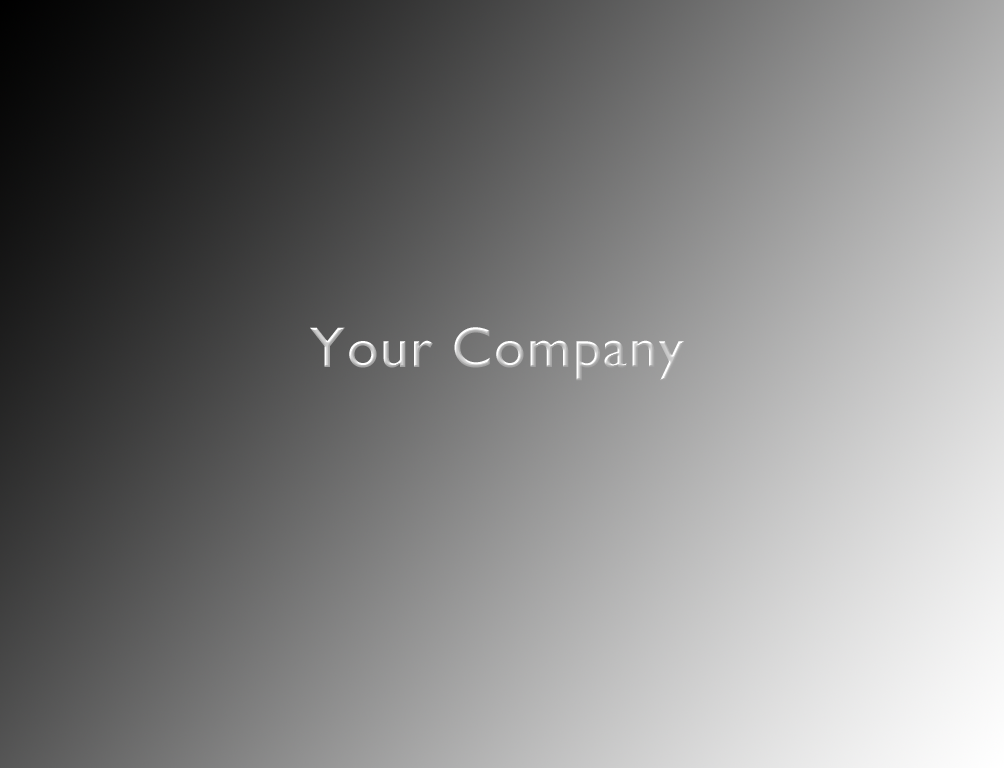
<style>
.page{position:relative;width:1004px;height:768px}
.page>*{position:absolute;margin:0}
.t1{font:57.6px "GillSans";letter-spacing:0.025em}
</style>
<div class="page">
<p class="t1" style="left:310px;top:327px;width:375px;height:54px">Your Company</p>
</div>
